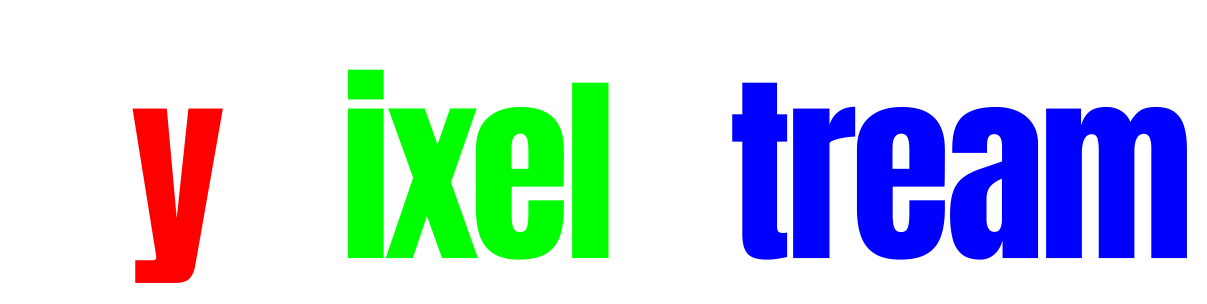
<style>
.page{position:relative;width:1207px;height:304px;background:#ffffff}
.page>*{position:absolute;margin:0}
.t1{font:203.8px "Anton-Regular";letter-spacing:-0.025em;color:#0000ff}
.t2{font:271.7px "Anton-Regular";letter-spacing:-0.025em;color:#ffffff}
.t3{font:203.8px "Anton-Regular";letter-spacing:-0.025em;color:#ff0000}
.t4{font:203.8px "Anton-Regular";letter-spacing:-0.025em;color:#00ff00}
</style>
<div class="page">
<p class="t1" style="left:19px;top:22px;width:1168px;height:261px"><span class="t2">P</span><span class="t3">y</span><span class="t2">P</span><span class="t4">ixel</span><span class="t2">S</span>tream</p>
</div>
